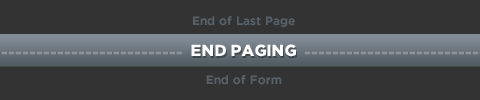
<style>
.page{position:relative;width:480px;height:100px;background:#333333}
.page>*{position:absolute;margin:0}
.t1{font:12px "GothamBold";color:#576169}
.t2{font:16px "GothamBlack";color:#8c949a;text-transform:uppercase}
.t3{font:16px "GothamBlack";color:#ffffff;text-transform:uppercase}
</style>
<div class="page">
<p class="t1" style="left:193px;top:16px;width:102px;height:11px">End of Last Page</p>
<p class="t2" style="left:1px;top:51px;width:181px;height:4px">--------------------------</p>
<p class="t3" style="left:191px;top:44px;width:105px;height:13px">End Paging</p>
<p class="t1" style="left:206px;top:75px;width:76px;height:10px">End of Form</p>
</div>
